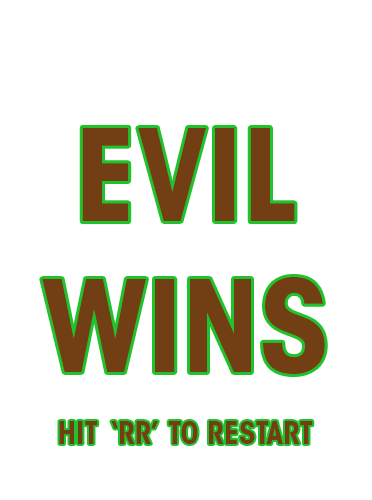
<style>
.page{position:relative;width:372px;height:500px;background:#ffffff}
.page>*{position:absolute;margin:0}
.t1{font:126px "ITCAvantGardeStd-BoldCn";color:#713f13}
.t2{font:30px "ITCAvantGardeStd-BoldCn";color:#713f13}
</style>
<div class="page">
<p class="t1" style="left:42px;top:127px;width:283px;height:248px;text-align:center">EVIL<br>WINS</p>
<p class="t2" style="left:59px;top:421px;width:254px;height:23px">HIT  ‘RR’  TO RESTART</p>
</div>
